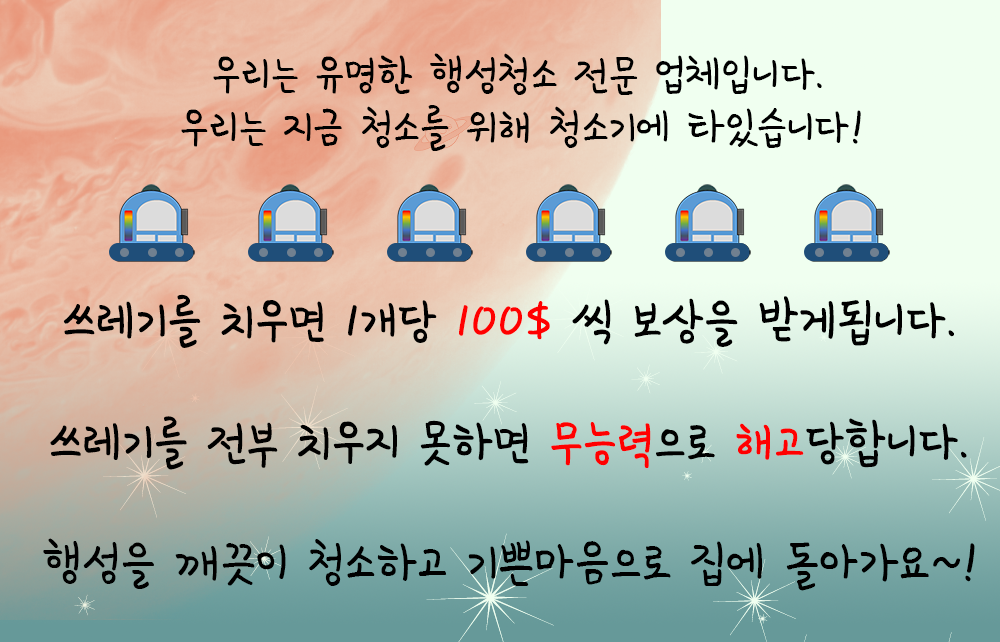
<style>
.page{position:relative;width:1000px;height:642px}
.page>*{position:absolute;margin:0}
.t1{font:58.3px "SDMiSaeng";color:#000000}
.t2{font:66.7px "SDMiSaeng";color:#000000}
.t3{font:66.7px "SDMiSaeng";color:#ff0000}
</style>
<div class="page">
<p class="t1" style="left:213px;top:53px;width:609px;height:42px">우리는 유명한 행성청소 전문 업체입니다.</p>
<p class="t1" style="left:181px;top:105px;width:680px;height:46px">우리는 지금 청소를 위해 청소기에 타있습니다!</p>
<p class="t2" style="left:63px;top:294px;width:891px;height:54px">쓰레기를 치우면 1개당 <span class="t3">100$ </span>씩 보상을 받게됩니다.</p>
<p class="t2" style="left:50px;top:416px;width:917px;height:54px">쓰레기를 전부 치우지 못하면 <span class="t3">무능력</span>으로 <span class="t3">해고</span>당합니다.</p>
<p class="t2" style="left:43px;top:538px;width:932px;height:53px">행성을 깨끗이 청소하고 기쁜마음으로 집에 돌아가요~!</p>
</div>
